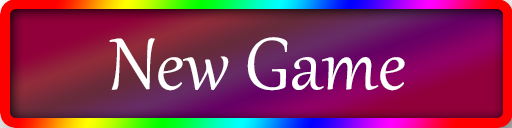
<style>
.page{position:relative;width:512px;height:128px}
.page>*{position:absolute;margin:0}
.t1{font:90px "Gabriola";color:#ffffff}
</style>
<div class="page">
<p class="t1" style="left:109px;top:37px;width:296px;height:54px">New Game</p>
</div>
